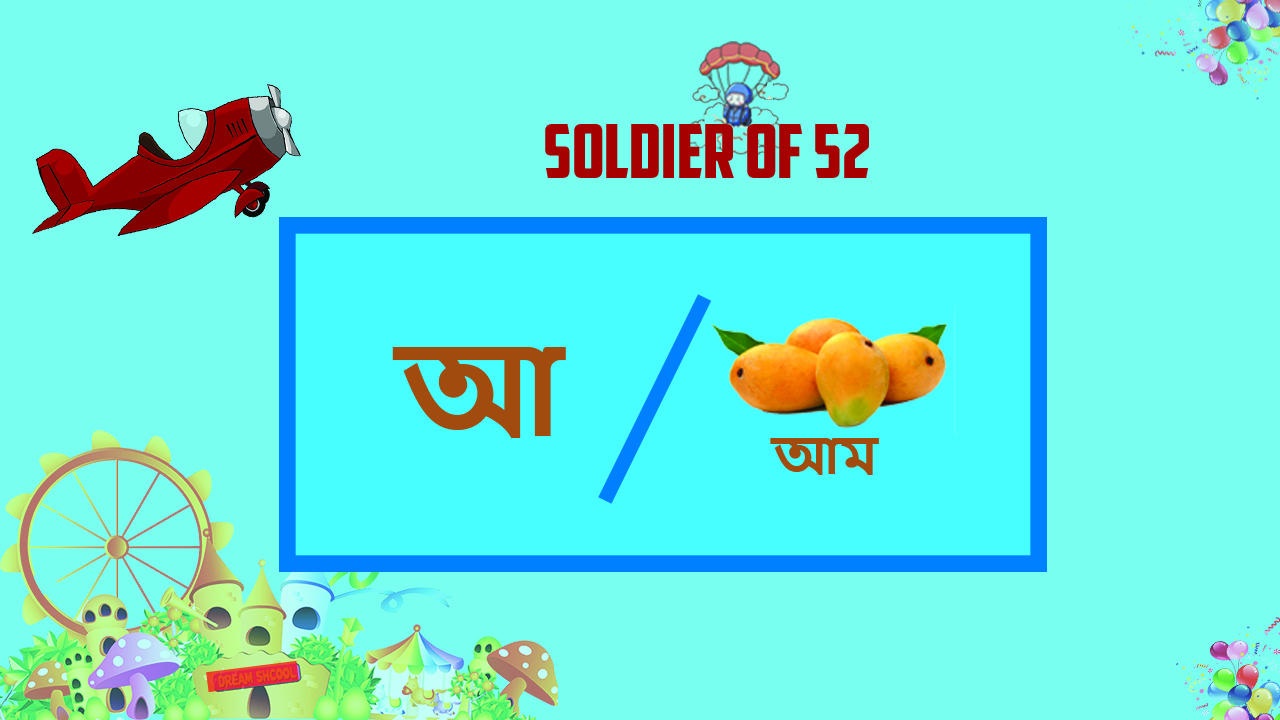
<style>
.page{position:relative;width:1280px;height:720px;background:#78ffef}
.page>*{position:absolute;margin:0}
.t1{font:74.5px "AmericanCaptain";color:#a60000}
.t2{font:122.1px "NirmalaUI-Bold";color:#a24b0d}
.t3{font:49.7px "NirmalaUI-Bold";color:#a24b0d}
</style>
<div class="page">
<p class="t1" style="left:545px;top:124px;width:324px;height:54px">SOLDIER OF 52</p>
<p class="t2" style="left:392px;top:347px;width:174px;height:91px">আ</p>
<p class="t3" style="left:770px;top:438px;width:109px;height:37px">আম</p>
</div>
